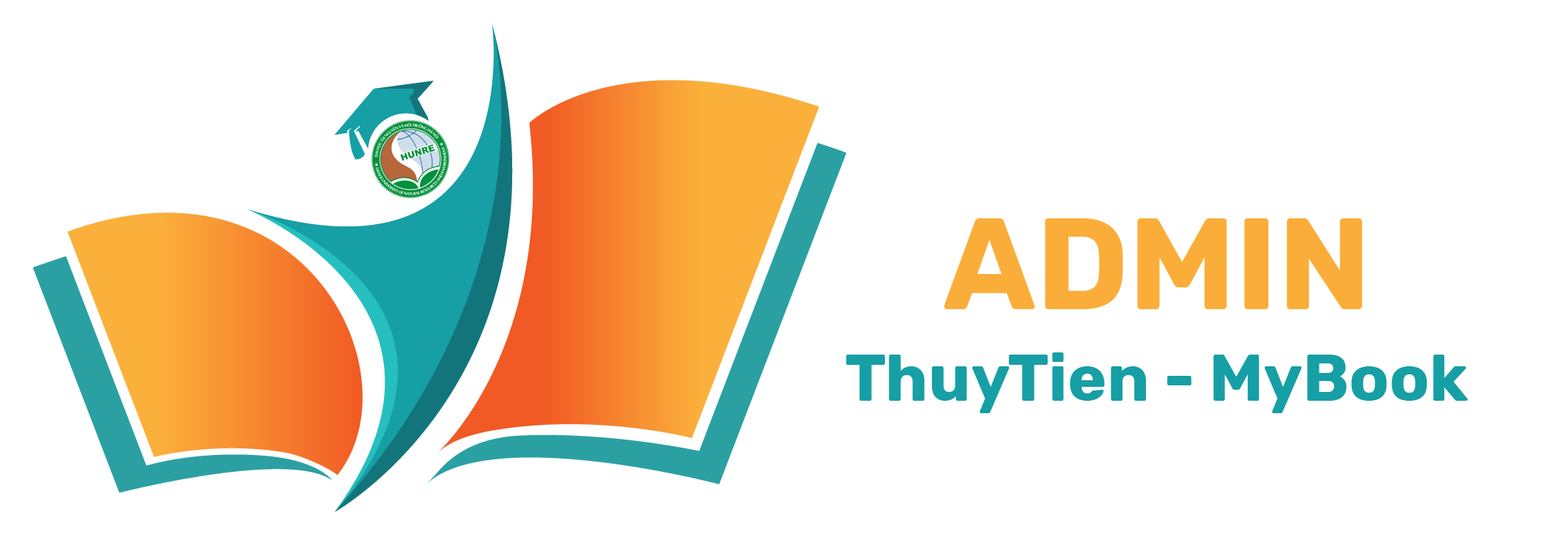
<style>
.page{position:relative;width:1568px;height:559px;background:#ffffff}
.page>*{position:absolute;margin:0}
.t1{font:129.4px "DVNRubik-Bold";color:#fbad3a}
.t2{font:65.9px "DVNRubik-Bold";color:#169fa5}
</style>
<div class="page">
<p class="t1" style="left:944px;top:218px;width:418px;height:91px">ADMIN</p>
<p class="t2" style="left:846px;top:352px;width:622px;height:61px">ThuyTien - MyBook</p>
</div>
